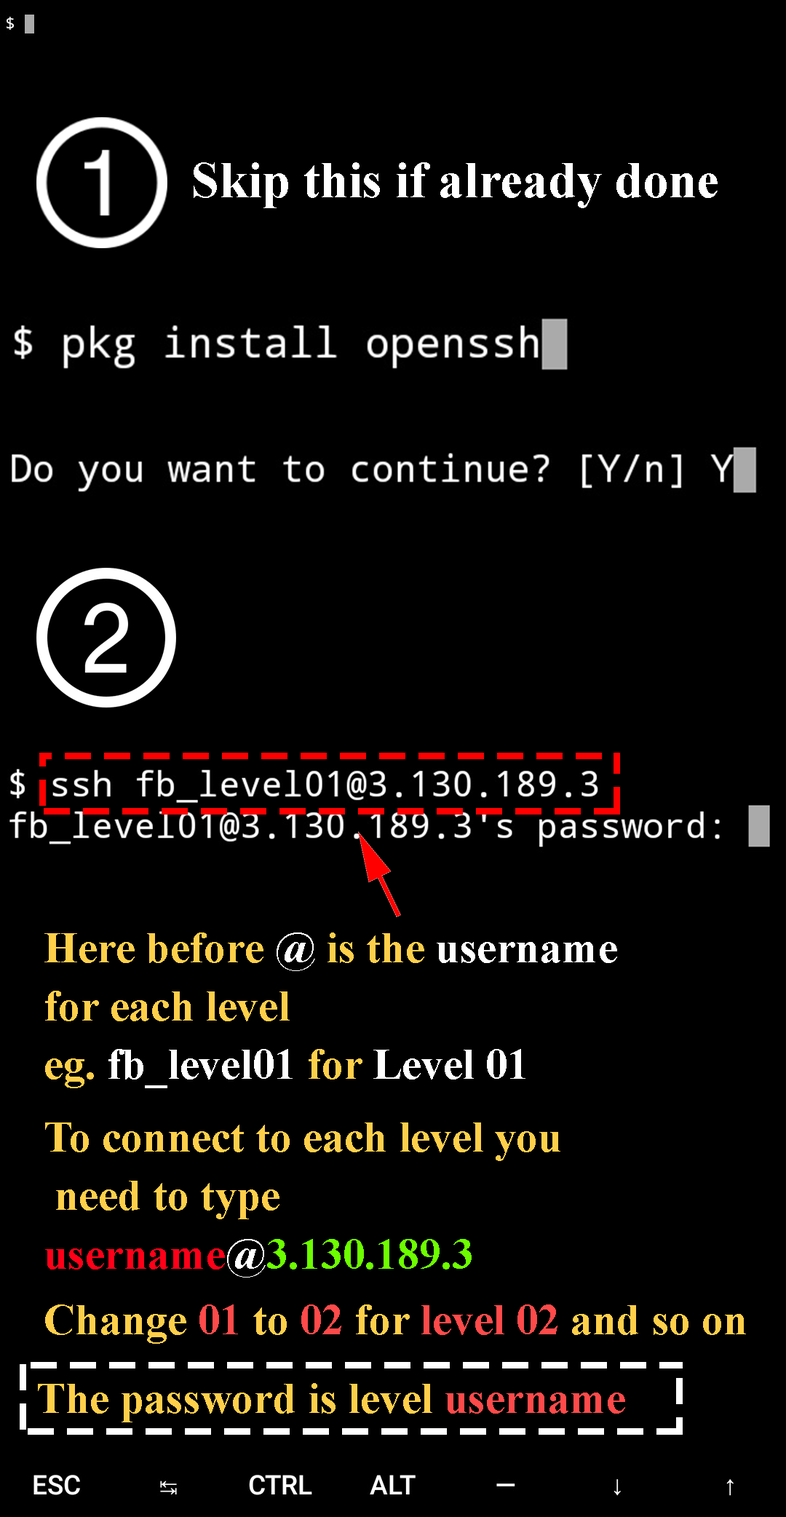
<style>
.page{position:relative;width:786px;height:1517px;background:#000000}
.page>*{position:absolute;margin:0}
.t1{font:51px "TimesNewRomanPS-BoldMT";color:#ffffff}
.t2{font:43.7px/7.3px "TimesNewRomanPS-BoldMT";color:#ffcf4a}
.t3{font:43.7px/7.3px "TimesNewRomanPS-BoldMT";color:#ffffff}
.t4{font:43.7px/7.3px "TimesNewRomanPS-BoldMT";color:#ff0018}
.t5{font:43.7px/7.3px "TimesNewRomanPS-BoldMT";color:#6cff00}
.t6{font:43.7px/7.3px "TimesNewRomanPS-BoldMT";color:#ff4a4a}
.t7{font:43.7px "TimesNewRomanPS-BoldMT";color:#ffcf4a}
.t8{font:43.7px "TimesNewRomanPS-BoldMT";color:#ff4a4a}
</style>
<div class="page">
<p class="t1" style="left:194px;top:162px;width:524px;height:46px">Skip this if already done</p>
<p class="t2" style="left:44px;top:932px;width:702px;height:412px">Here before <span class="t3">@ </span>is the <span class="t3">username</span> <br><br><br><br><br><br><br><br>for each level<br><br><br><br><br><br><br><br>eg. <span class="t3">fb_level01</span> for <span class="t3">Level 01<br><br><br><br><br><br><br><br><br><br></span>To connect to each level you<br><br><br><br><br><br><br><br> need to type<br><br><br><br><br><br><br><br><span class="t4">username</span><span class="t3">@</span><span class="t5">3.130.189.3<br><br><br><br><br><br><br><br><br></span>Change<span class="t6"> 01</span> to <span class="t6">02</span> for <span class="t6">level 02 </span>and so on</p>
<p class="t7" style="left:38px;top:1383px;width:587px;height:39px">The password is level <span class="t8">username</span></p>
</div>
